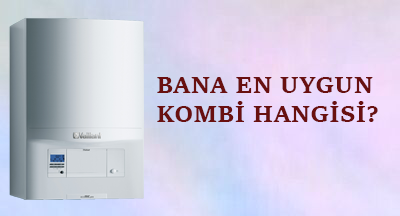
<style>
.page{position:relative;width:400px;height:216px}
.page>*{position:absolute;margin:0}
.t1{font:24px "SitkaSmall-Bold";color:#691010}
</style>
<div class="page">
<p class="t1" style="left:157px;top:77px;width:221px;height:45px">BANA EN UYGUN <br>KOMBİ HANGİSİ?</p>
</div>
